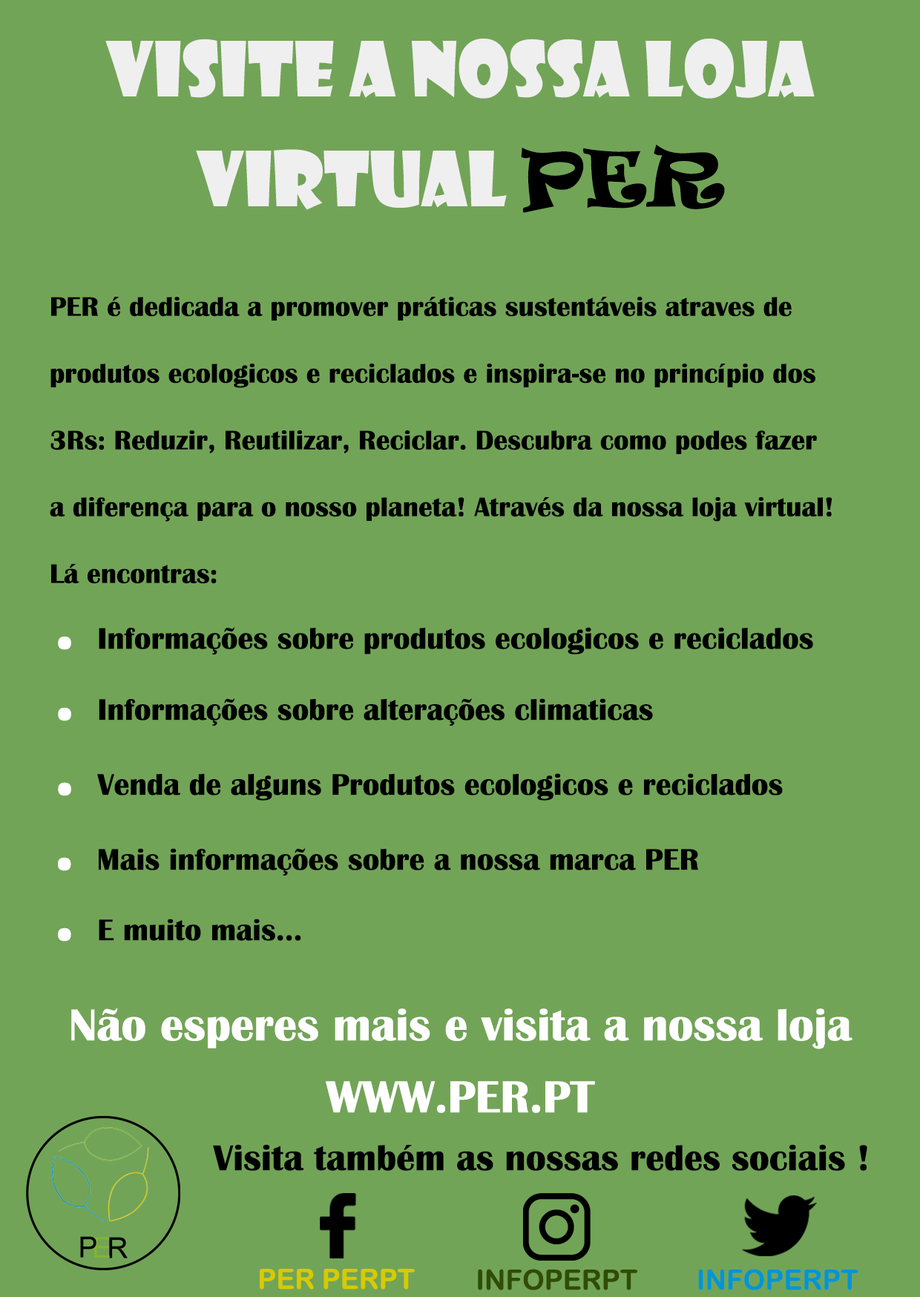
<style>
.page{position:relative;width:920px;height:1297px;background:#72a457}
.page>*{position:absolute;margin:0}
.t1{font:74.2px "ShowcardGothic-Reg";color:#efefef}
.t2{font:74.2px "Ravie";color:#000000}
.t3{font:27.8px "BritannicBold";color:#000000}
.t4{font:30.9px "BritannicBold";color:#000000}
.t5{font:74.2px "BritannicBold";color:#ffffff}
.t6{font:46.4px "BritannicBold";color:#ffffff}
.t7{font:37.1px "BritannicBold";color:#000000}
.t8{font:27.8px "ArialRoundedMTBold";color:#d7ca00}
.t9{font:27.8px "ArialRoundedMTBold";color:#304d02}
.t10{font:27.8px "ArialRoundedMTBold";color:#0095d4}
</style>
<div class="page">
<p class="t1" style="left:105px;top:39px;width:709px;height:60px">Visite a nossa loja</p>
<p class="t1" style="left:196px;top:144px;width:529px;height:69px">virtual <span class="t2">PER</span></p>
<p class="t3" style="left:50px;top:297px;width:782px;height:287px">PER é dedicada a promover práticas sustentáveis atraves de <br>produtos ecologicos e reciclados e inspira-se no princípio dos <br>3Rs: Reduzir, Reutilizar, Reciclar. Descubra como podes fazer <br>a diferença para o nosso planeta! Através da nossa loja virtual! <br>Lá encontras:</p>
<p class="t4" style="left:58px;top:627px;width:755px;height:28px"><span class="t5">. </span>Informações sobre produtos ecologicos e reciclados</p>
<p class="t4" style="left:58px;top:698px;width:595px;height:27px"><span class="t5">. </span>Informações sobre alterações climaticas</p>
<p class="t4" style="left:58px;top:773px;width:725px;height:27px"><span class="t5">. </span>Venda de alguns Produtos ecologicos e reciclados</p>
<p class="t4" style="left:58px;top:848px;width:641px;height:27px"><span class="t5">. </span>Mais informações sobre a nossa marca PER</p>
<p class="t4" style="left:58px;top:918px;width:243px;height:23px"><span class="t5">. </span>E muito mais...</p>
<p class="t6" style="left:71px;top:1008px;width:781px;height:41px">Não esperes mais e visita a nossa loja</p>
<p class="t6" style="left:326px;top:1081px;width:269px;height:32px">WWW.PER.PT</p>
<p class="t7" style="left:213px;top:1144px;width:654px;height:26px">Visita também as nossas redes sociais !</p>
<p class="t8" style="left:260px;top:1268px;width:155px;height:21px">PER PERPT</p>
<p class="t9" style="left:478px;top:1268px;width:159px;height:22px">INFOPERPT</p>
<p class="t10" style="left:698px;top:1268px;width:160px;height:22px">INFOPERPT</p>
</div>
